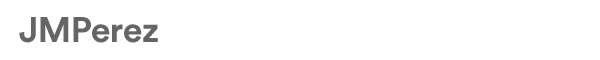
<style>
.page{position:relative;width:600px;height:60px;background:#ffffff}
.page>*{position:absolute;margin:0}
.t1{font:35.2px "CircularSpotifyHead-Bold";letter-spacing:-0.005em;color:#656565}
</style>
<div class="page">
<p class="t1" style="left:19px;top:17px;width:139px;height:26px">JMPerez</p>
</div>
